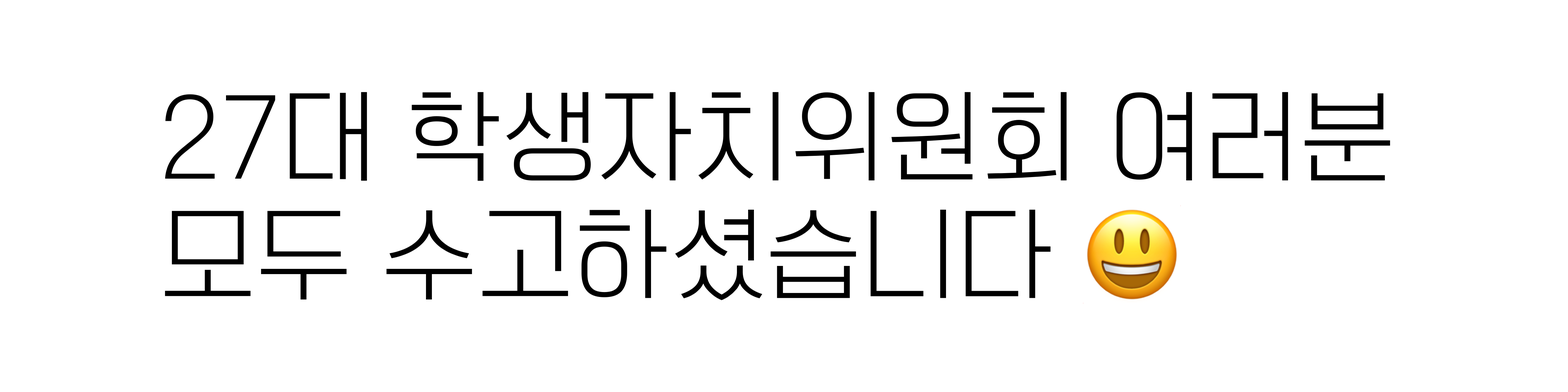
<style>
.page{position:relative;width:1568px;height:392px;background:#ffffff}
.page>*{position:absolute;margin:0}
.t1{font:98px "OTOmniGothicL";color:#000000}
.t2{font:98px "AppleColorEmoji";color:#000000}
</style>
<div class="page">
<p class="t1" style="left:165px;top:92px;width:1225px;height:211px">27대 학생자치위원회 여러분<br>모두 수고하셨습니다 <span class="t2">😃</span></p>
</div>
